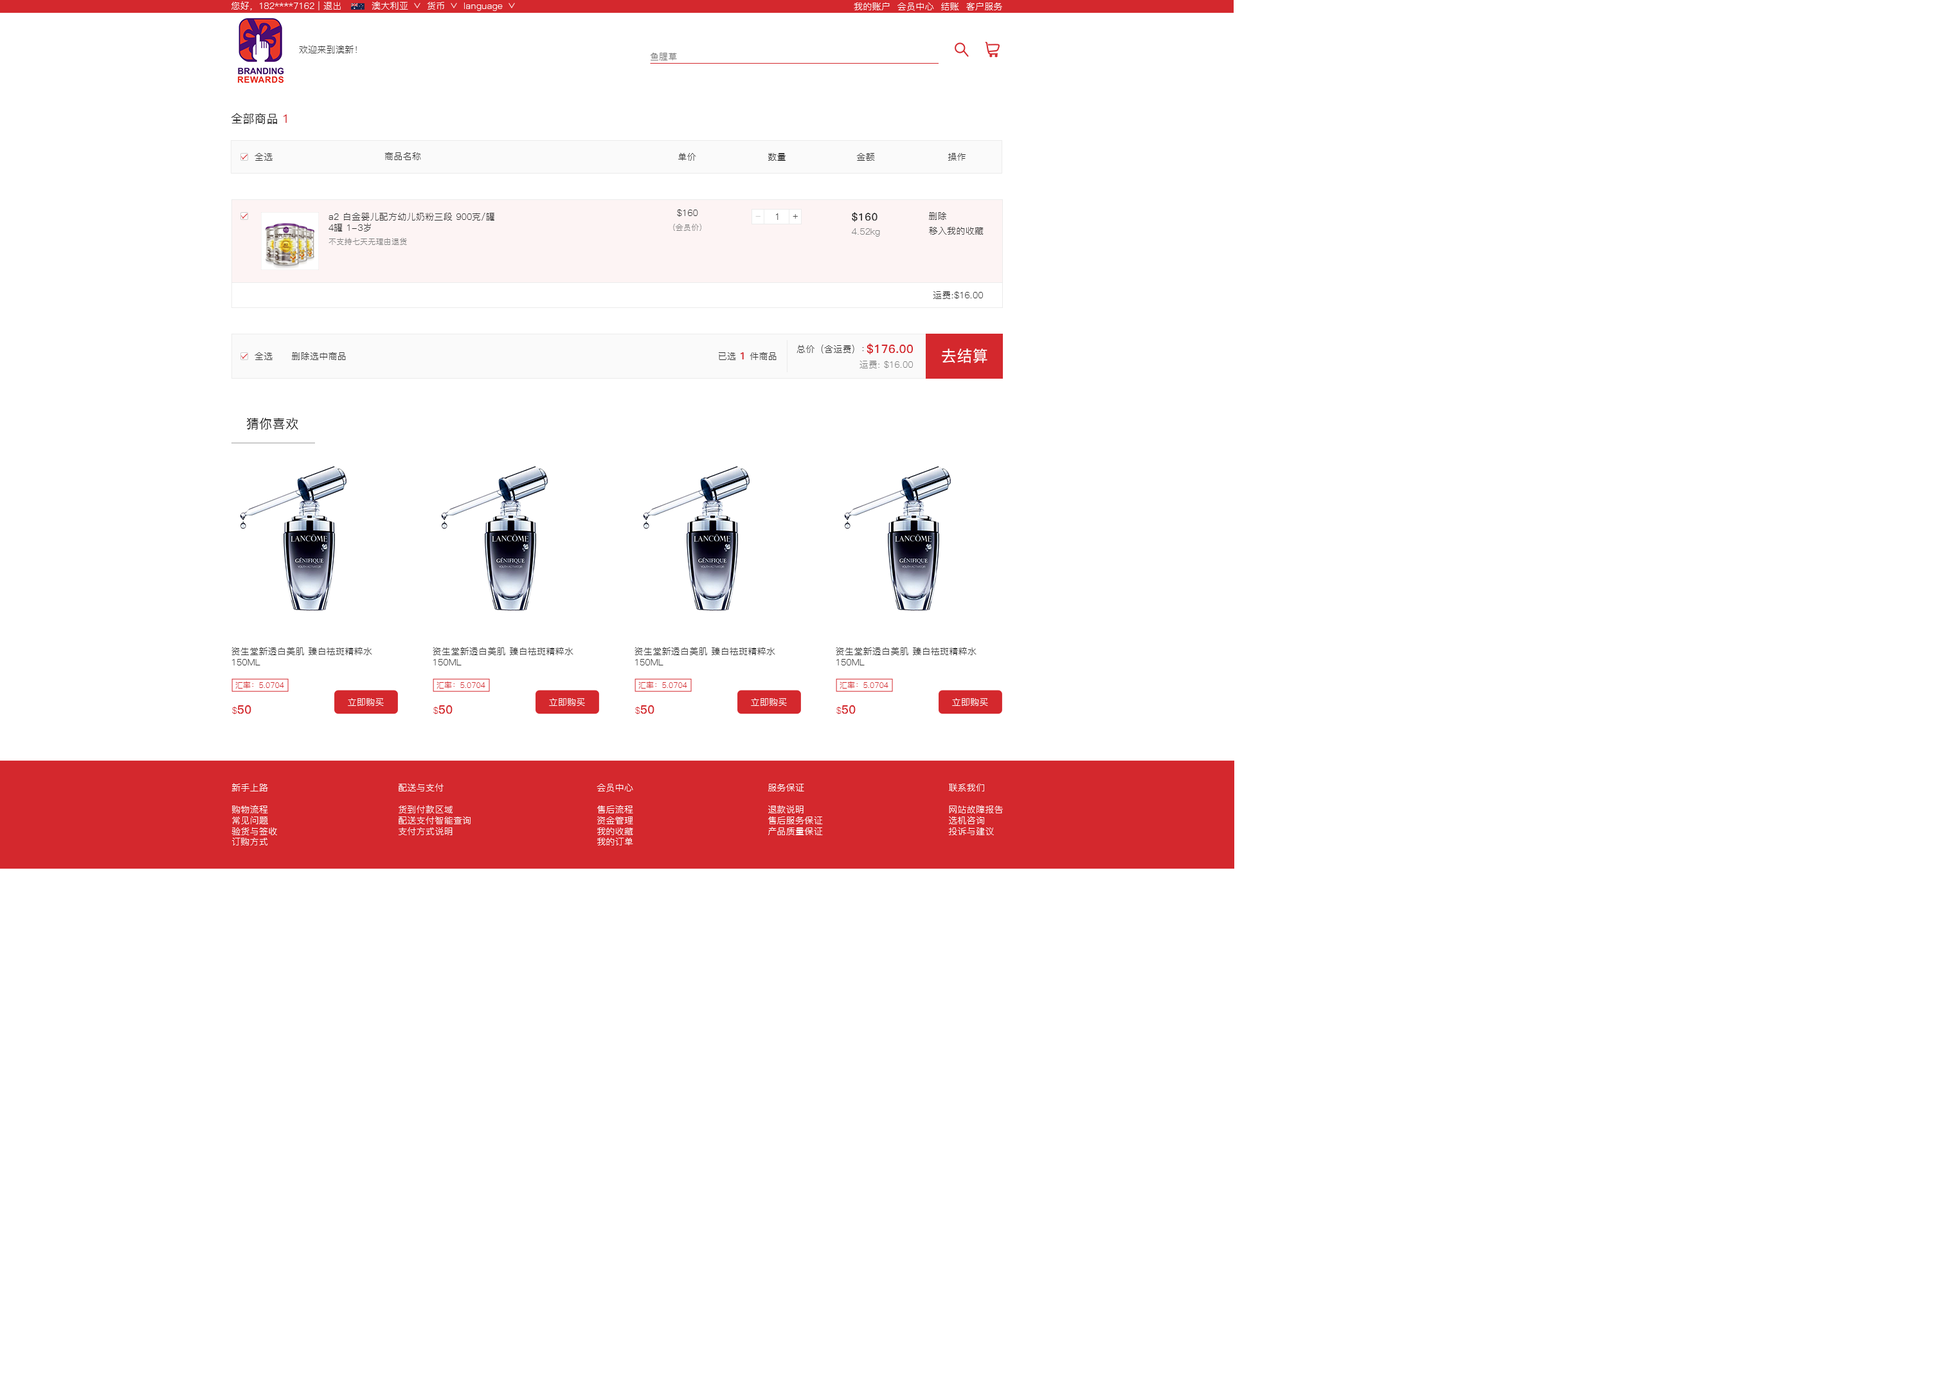
<style>
.page{position:relative;width:1944px;height:1381px;background:#ffffff}
.page>*{position:absolute;margin:0}
.t1{font:9px "PingFang-SC-Regular";letter-spacing:0.02em;color:#ffffff}
.t2{font:9px "PingFang-SC-Regular";letter-spacing:0.02em;color:#333333}
.t3{font:9px "PingFang-SC-Regular";letter-spacing:0.02em;color:#767676}
.t4{font:11.6px "PingFang-SC-Medium";letter-spacing:0.02em;color:#333333}
.t5{font:11.6px "PingFang-SC-Medium";letter-spacing:0.02em;color:#d4282d}
.t6{font:9px "PingFang-SC-Regular";letter-spacing:0.02em;color:#cccccc}
.t7{font:9px "PingFang-SC-Regular";letter-spacing:0.02em;color:#4d4d4d}
.t8{font:10.3px "PingFang-SC-Bold";letter-spacing:0.02em;color:#333333}
.t9{font:7.7px "PingFang-SC-Regular";letter-spacing:0.02em;color:#808080}
.t10{font:9px "PingFang-SC-Regular";letter-spacing:0.02em;color:#808080}
.t11{font:10.3px "PingFang-SC-Bold";letter-spacing:0.02em;color:#d4282d}
.t12{font:11.6px "PingFang-SC-Bold";letter-spacing:0.02em;color:#d4282d}
.t13{font:15.4px "PingFang-SC-Medium";letter-spacing:0.02em;color:#ffffff}
.t14{font:12.9px "PingFang-SC-Medium";letter-spacing:0.02em;color:#333333}
.t15{font:7.7px "PingFang-SC-Regular";letter-spacing:0.02em;color:#d4282d}
.t16{font:9px "PingFang-SC-Regular";letter-spacing:0.02em;color:#d4282d}
.t17{font:9px "PingFang-SC-Regular";letter-spacing:0.02em;color:#fffefe}
</style>
<div class="page">
<p class="t1" style="left:231px;top:1px;width:110px;height:9px">您好，182****7162 | 退出</p>
<p class="t1" style="left:372px;top:1px;width:36px;height:9px">澳大利亚</p>
<p class="t1" style="left:427px;top:2px;width:17px;height:8px">货币</p>
<p class="t1" style="left:464px;top:3px;width:39px;height:8px">language</p>
<p class="t1" style="left:854px;top:2px;width:148px;height:9px">我的账户  会员中心  结账  客户服务</p>
<p class="t2" style="left:299px;top:45px;width:58px;height:8px">欢迎来到澳新！</p>
<p class="t3" style="left:650px;top:53px;width:27px;height:7px">鱼腥草</p>
<p class="t4" style="left:231px;top:113px;width:56px;height:11px">全部商品 <span class="t5">1</span></p>
<p class="t2" style="left:255px;top:153px;width:18px;height:8px">全选</p>
<p class="t2" style="left:384px;top:152px;width:37px;height:8px">商品名称</p>
<p class="t2" style="left:678px;top:153px;width:18px;height:8px">单价</p>
<p class="t2" style="left:768px;top:153px;width:18px;height:8px">数量</p>
<p class="t2" style="left:857px;top:153px;width:18px;height:8px">金额</p>
<p class="t2" style="left:948px;top:153px;width:18px;height:8px">操作</p>
<p class="t2" style="left:677px;top:209px;width:21px;height:8px">$160</p>
<p class="t2" style="left:328px;top:213px;width:166px;height:18px">a2 白金婴儿配方幼儿奶粉三段 900克/罐 <br>4罐 1-3岁</p>
<p class="t6" style="left:755px;top:216px;width:5px;height:1px">-</p>
<p class="t2" style="left:776px;top:213px;width:3px;height:7px">1</p>
<p class="t7" style="left:793px;top:214px;width:5px;height:5px">+</p>
<p class="t8" style="left:852px;top:212px;width:26px;height:10px">$160</p>
<p class="t2" style="left:929px;top:212px;width:17px;height:8px">删除</p>
<p class="t9" style="left:673px;top:224px;width:28px;height:7px">(会员价)</p>
<p class="t10" style="left:852px;top:228px;width:28px;height:9px">4.52kg</p>
<p class="t2" style="left:929px;top:227px;width:55px;height:8px">移入我的收藏</p>
<p class="t9" style="left:328px;top:238px;width:79px;height:7px">不支持七天无理由退货</p>
<p class="t2" style="left:933px;top:291px;width:50px;height:8px">运费:$16.00</p>
<p class="t2" style="left:255px;top:352px;width:18px;height:8px">全选</p>
<p class="t2" style="left:292px;top:352px;width:54px;height:8px">删除选中商品</p>
<p class="t2" style="left:719px;top:352px;width:58px;height:8px">已选 <span class="t11">1</span> 件商品</p>
<p class="t2" style="left:797px;top:345px;width:67px;height:9px">总价（含运费）：</p>
<p class="t12" style="left:867px;top:343px;width:46px;height:11px">$176.00</p>
<p class="t13" style="left:942px;top:348px;width:45px;height:15px">去结算</p>
<p class="t10" style="left:860px;top:361px;width:53px;height:7px">运费: $16.00</p>
<p class="t14" style="left:247px;top:417px;width:51px;height:12px">猜你喜欢</p>
<p class="t2" style="left:231px;top:647px;width:141px;height:18px">资生堂新透白美肌 臻白祛斑精粹水<br>150ML</p>
<p class="t2" style="left:433px;top:647px;width:140px;height:18px">资生堂新透白美肌 臻白祛斑精粹水<br>150ML</p>
<p class="t2" style="left:634px;top:647px;width:141px;height:18px">资生堂新透白美肌 臻白祛斑精粹水<br>150ML</p>
<p class="t2" style="left:836px;top:647px;width:141px;height:18px">资生堂新透白美肌 臻白祛斑精粹水<br>150ML</p>
<p class="t15" style="left:235px;top:681px;width:49px;height:7px">汇率：5.0704</p>
<p class="t15" style="left:437px;top:681px;width:48px;height:7px">汇率：5.0704</p>
<p class="t15" style="left:638px;top:681px;width:49px;height:7px">汇率：5.0704</p>
<p class="t15" style="left:840px;top:681px;width:48px;height:7px">汇率：5.0704</p>
<p class="t1" style="left:348px;top:698px;width:36px;height:8px">立即购买</p>
<p class="t1" style="left:549px;top:698px;width:36px;height:8px">立即购买</p>
<p class="t1" style="left:751px;top:698px;width:36px;height:8px">立即购买</p>
<p class="t1" style="left:952px;top:698px;width:36px;height:8px">立即购买</p>
<p class="t12" style="left:232px;top:705px;width:19px;height:9px"><span class="t16">$</span>50</p>
<p class="t12" style="left:433px;top:705px;width:20px;height:9px"><span class="t16">$</span>50</p>
<p class="t12" style="left:635px;top:705px;width:19px;height:9px"><span class="t16">$</span>50</p>
<p class="t12" style="left:836px;top:705px;width:20px;height:9px"><span class="t16">$</span>50</p>
<p class="t17" style="left:231px;top:783px;width:46px;height:62px">新手上路<br><br>购物流程<br>常见问题<br>验货与签收<br>订购方式</p>
<p class="t17" style="left:399px;top:783px;width:72px;height:52px">配送与支付<br><br>货到付款区域<br>配送支付智能查询<br>支付方式说明</p>
<p class="t17" style="left:597px;top:784px;width:36px;height:61px">会员中心<br><br>售后流程<br>资金管理<br>我的收藏<br>我的订单</p>
<p class="t17" style="left:768px;top:784px;width:55px;height:51px">服务保证<br><br>退款说明<br>售后服务保证<br>产品质量保证</p>
<p class="t17" style="left:948px;top:784px;width:55px;height:51px">联系我们<br><br>网站故障报告<br>选机咨询<br>投诉与建议</p>
</div>
